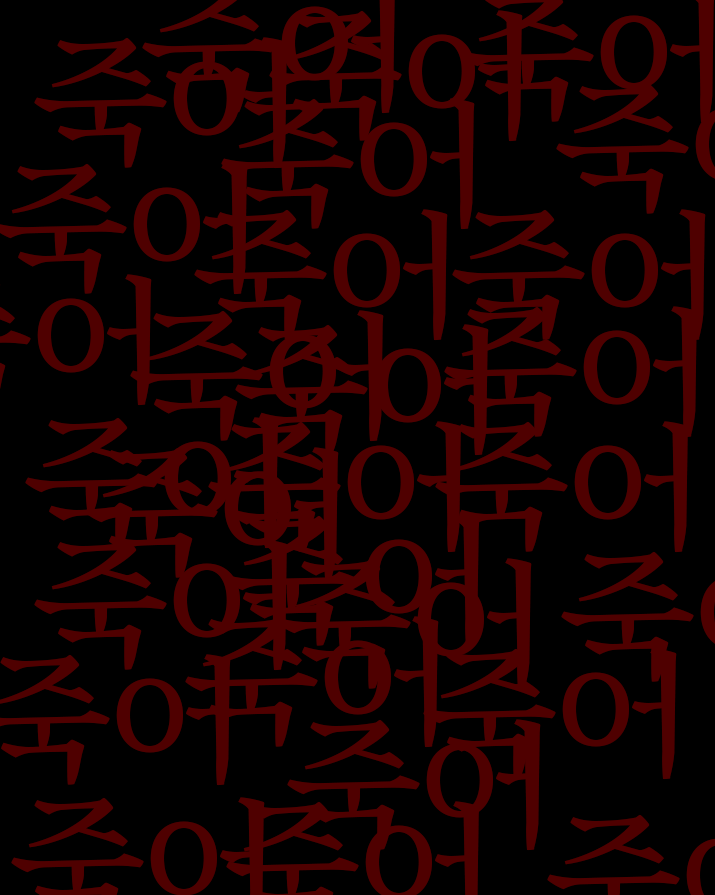
<style>
.page{position:relative;width:715px;height:895px;background:#000000}
.page>*{position:absolute;margin:0}
.t1{font:150px "Jeongnimsaji-R";letter-spacing:-0.05em;color:#4f0000}
</style>
<div class="page">
<p class="t1" style="left:269px;top:10px;width:254px;height:132px">죽어</p>
<p class="t1" style="left:34px;top:37px;width:254px;height:132px">죽어</p>
<p class="t1" style="left:221px;top:98px;width:254px;height:132px">죽어</p>
<p class="t1" style="left:194px;top:209px;width:254px;height:132px">죽어</p>
<p class="t1" style="left:452px;top:209px;width:254px;height:132px">죽어</p>
<p class="t1" style="left:130px;top:310px;width:254px;height:132px">죽어</p>
<p class="t1" style="left:444px;top:306px;width:254px;height:132px">죽어</p>
<p class="t1" style="left:235px;top:324px;width:254px;height:132px">죽어</p>
<p class="t1" style="left:25px;top:417px;width:254px;height:132px">죽어</p>
<p class="t1" style="left:208px;top:421px;width:254px;height:132px">죽어</p>
<p class="t1" style="left:435px;top:421px;width:254px;height:132px">죽어</p>
<p class="t1" style="left:85px;top:447px;width:254px;height:132px">죽어</p>
<p class="t1" style="left:226px;top:515px;width:254px;height:132px">죽어</p>
<p class="t1" style="left:34px;top:539px;width:254px;height:132px">죽어</p>
<p class="t1" style="left:278px;top:558px;width:254px;height:132px">죽어</p>
<p class="t1" style="left:185px;top:616px;width:254px;height:132px">죽어</p>
<p class="t1" style="left:423px;top:648px;width:254px;height:132px">죽어</p>
<p class="t1" style="left:287px;top:719px;width:254px;height:132px">죽어</p>
</div>
